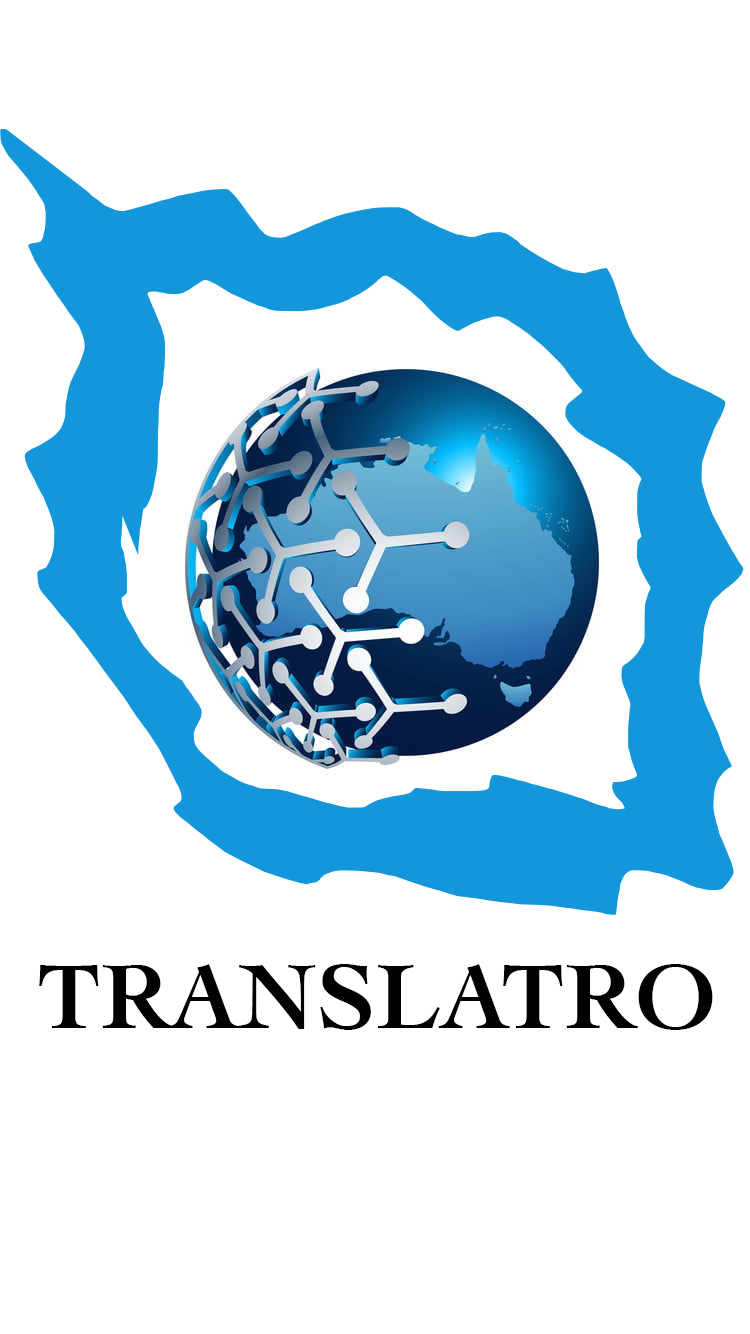
<style>
.page{position:relative;width:750px;height:1334px;background:#ffffff}
.page>*{position:absolute;margin:0}
.t1{font:96.5px "Cochin-Bold";letter-spacing:0.005em;color:#020101;text-transform:uppercase}
</style>
<div class="page">
<p class="t1" style="left:39px;top:964px;width:674px;height:66px">Translatro</p>
</div>
